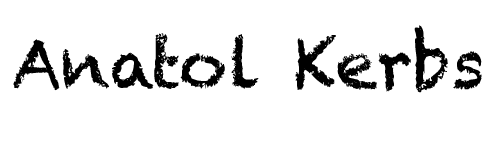
<style>
.page{position:relative;width:500px;height:150px;background:#ffffff}
.page>*{position:absolute;margin:0}
.t1{font:66.7px "Chalkduster";color:#000000}
</style>
<div class="page">
<p class="t1" style="left:13px;top:25px;width:469px;height:68px">Anatol Kerbs</p>
</div>
